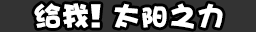
<style>
.page{position:relative;width:256px;height:32px;background:#333333}
.page>*{position:absolute;margin:0}
.t1{font:28px "DFPHaiBaoW12";color:#ffffff}
.t2{font:28px "DFPHaiBaoW12";letter-spacing:0.05em;color:#ffffff}
.t3{font:38.7px "MarioKartPositionFontRegular";color:#ffffff}
</style>
<div class="page">
<p class="t1" style="left:34px;top:3px;width:189px;height:26px">给<span class="t2">我</span><span class="t3">!</span> 太阳之力</p>
</div>
